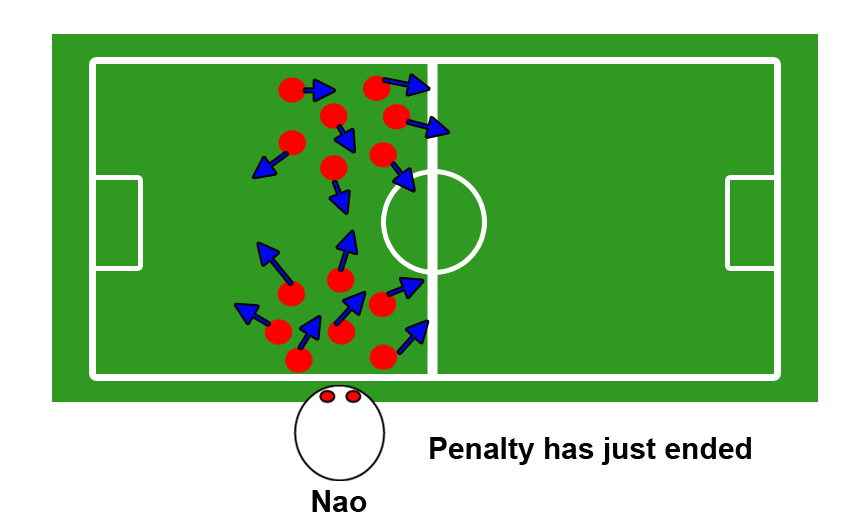
<style>
.page{position:relative;width:854px;height:526px;background:#309922}
.page>*{position:absolute;margin:0}
.t1{font:30px "Arial-BoldMT";color:#030303}
.t2{font:30px "Arial-BoldMT";color:#000000}
</style>
<div class="page">
<p class="t1" style="left:430px;top:437px;width:321px;height:28px">Penalty has just ended</p>
<p class="t2" style="left:312px;top:490px;width:55px;height:22px">Nao</p>
</div>
